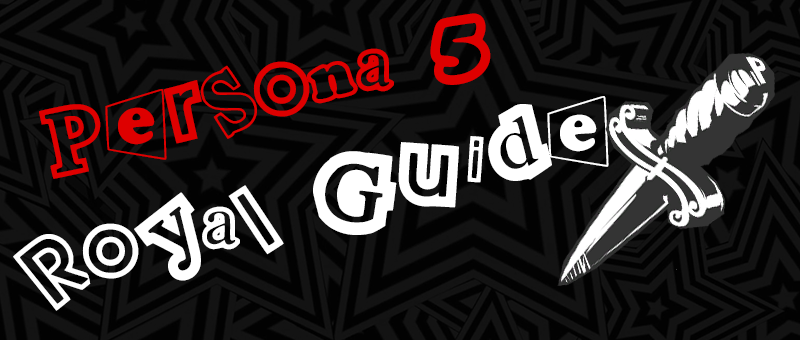
<style>
.page{position:relative;width:800px;height:340px;background:#131313}
.page>*{position:absolute;margin:0}
.t1{font:96px "Persona5MenuFontPrototype-Rg";color:#ffffff}
.t2{font:96px "Persona5MenuFontPrototype-Rg";color:#de0000}
</style>
<div class="page">
<p class="t1" style="left:13px;top:13px;width:596px;height:298px;text-align:center;rotate:-14deg"><span class="t2">Persona 5 <br></span>Royal Guide</p>
</div>
